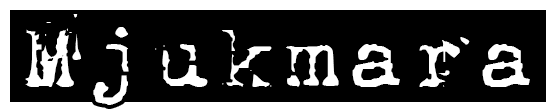
<style>
.page{position:relative;width:556px;height:112px;background:#000000}
.page>*{position:absolute;margin:0}
.t1{font:100px "1942report";color:#ffffff}
</style>
<div class="page">
<p class="t1" style="left:25px;top:14px;width:505px;height:91px">Mjukmara</p>
</div>
